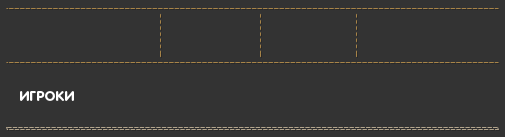
<style>
.page{position:relative;width:505px;height:137px;background:#333333}
.page>*{position:absolute;margin:0}
.t1{font:14px "RotondaC-Bold";letter-spacing:0.04em;color:#ffffff;text-transform:uppercase}
</style>
<div class="page">
<p class="t1" style="left:20px;top:91px;width:54px;height:10px">Игроки</p>
</div>
